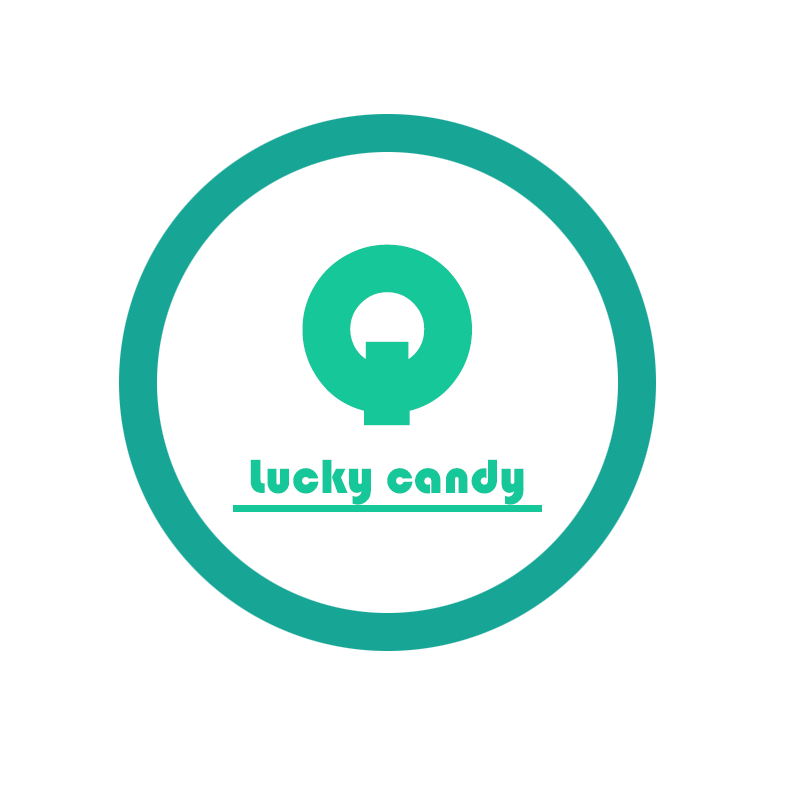
<style>
.page{position:relative;width:800px;height:800px;background:#ffffff}
.page>*{position:absolute;margin:0}
.t1{font:242px "STHupo";color:#16c79a}
.t2{font:50px "STHupo";color:#16c79a}
</style>
<div class="page">
<p class="t1" style="left:302px;top:244px;width:170px;height:182px">Q</p>
<p class="t2" style="left:250px;top:459px;width:274px;height:46px">Lucky candy</p>
</div>
